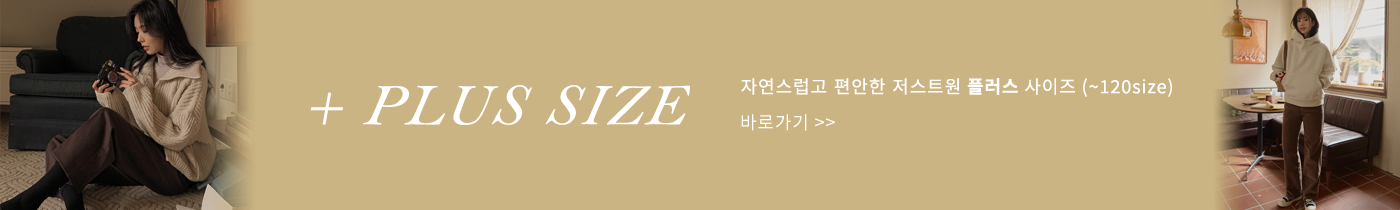
<style>
.page{position:relative;width:1400px;height:210px;background:#cbb483}
.page>*{position:absolute;margin:0}
.t1{font:18px "NotoSansKR-Regular";letter-spacing:0.05em;color:#ffffff}
.t2{font:18px "NotoSansKR-Bold";letter-spacing:0.05em;color:#ffffff}
.t3{font:60px "BellMTItalic";letter-spacing:0.05em;color:#ffffff;font-style:italic}
</style>
<div class="page">
<p class="t1" style="left:741px;top:78px;width:431px;height:19px">자연스럽고 편안한 저스트원<span class="t2"> 플러스</span> 사이즈 (~120size)</p>
<p class="t3" style="left:310px;top:85px;width:380px;height:40px">+ PLUS SIZE</p>
<p class="t1" style="left:741px;top:114px;width:94px;height:17px">바로가기 &gt;&gt;</p>
</div>
